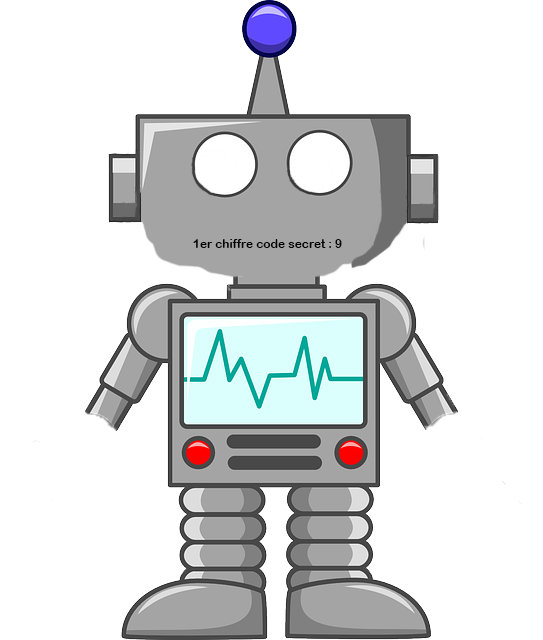
<style>
.page{position:relative;width:543px;height:640px;background:#ffffff}
.page>*{position:absolute;margin:0}
.t1{font:12px "ArialRoundedMTBold";color:#010101}
</style>
<div class="page">
<p class="t1" style="left:193px;top:239px;width:149px;height:9px">1er chiffre code secret : 9</p>
</div>
